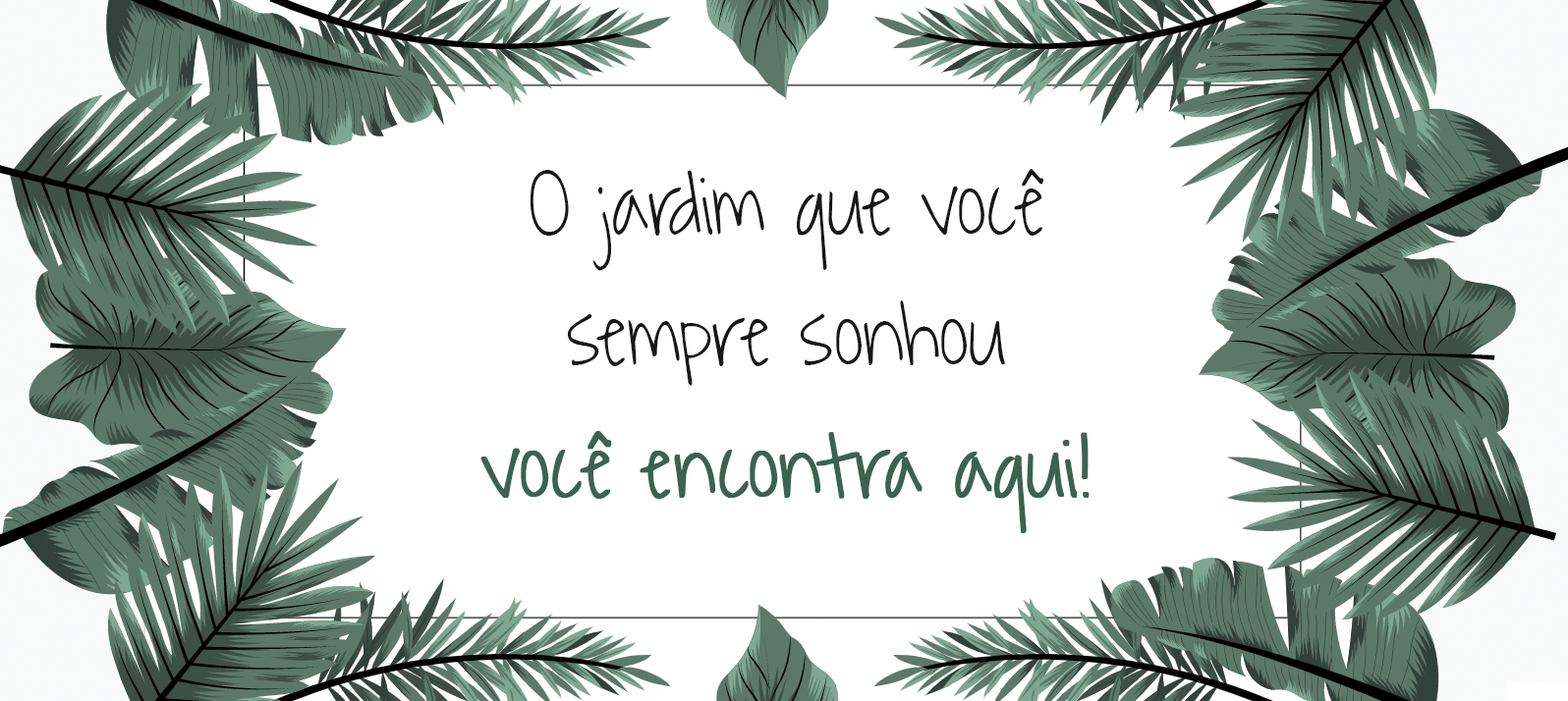
<style>
.page{position:relative;width:1568px;height:701px;background:#ffffff}
.page>*{position:absolute;margin:0}
.t1{font:78.6px/131px "WaitingfortheSunrise";color:#171717}
.t2{font:78.6px/131px "WaitingfortheSunrise";color:#3a6351;font-weight:bold}
</style>
<div class="page">
<p class="t1" style="left:480px;top:169px;width:610px;height:364px;text-align:center">O jardim que você<br>sempre sonhou<br><span class="t2">você encontra aqui!</span></p>
</div>
